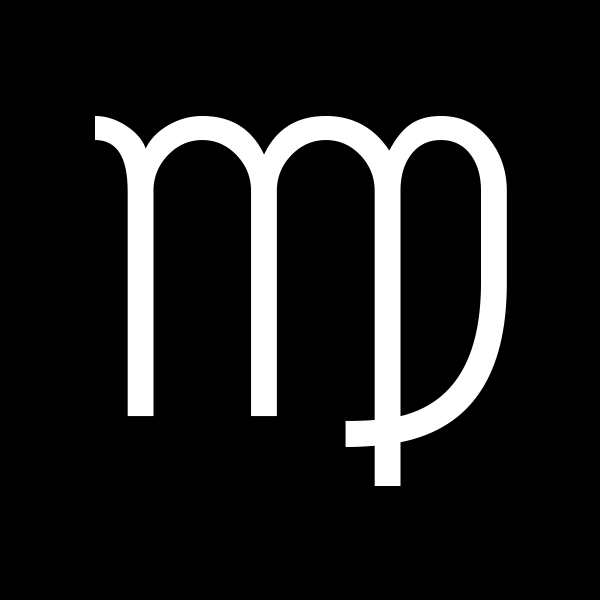
<style>
.page{position:relative;width:600px;height:600px;background:#000000}
.page>*{position:absolute;margin:0}
.t1{font:428.5px "ArialUnicodeMS";color:#ffffff}
</style>
<div class="page">
<p class="t1" style="left:95px;top:116px;width:412px;height:370px">♍︎</p>
</div>
